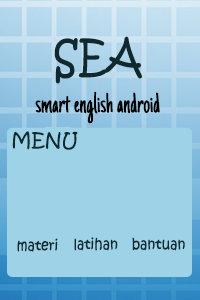
<style>
.page{position:relative;width:200px;height:300px;background:#9ed2e6}
.page>*{position:absolute;margin:0}
.t1{font:45px "KristenITC-Regular";color:#10292f;scale:0.89 1}
.t2{font:29.8px "JustAnotherHand-Regular";color:#000000;scale:0.89 1}
.t3{font:19px "KristenITC-Regular";color:#10292f}
.t4{font:15px "KristenITC-Regular";color:#10292f;scale:0.89 1}
</style>
<div class="page">
<p class="t1" style="left:54px;top:36px;width:88px;height:48px">SEA</p>
<p class="t2" style="left:35px;top:91px;width:125px;height:33px">smart english android</p>
<p class="t3" style="left:12px;top:131px;width:66px;height:19px">MENU</p>
<p class="t4" style="left:17px;top:238px;width:41px;height:14px">materi</p>
<p class="t4" style="left:74px;top:237px;width:44px;height:14px">latihan</p>
<p class="t4" style="left:132px;top:237px;width:53px;height:14px">bantuan</p>
</div>
